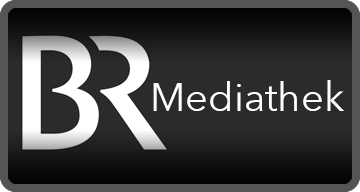
<style>
.page{position:relative;width:360px;height:192px;background:#2b2b2c}
.page>*{position:absolute;margin:0}
.t1{font:40px "AvenirNext-Regular";color:#fefefe}
</style>
<div class="page">
<p class="t1" style="left:153px;top:80px;width:191px;height:31px">Mediathek</p>
</div>
